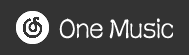
<style>
.page{position:relative;width:189px;height:55px;background:#333333}
.page>*{position:absolute;margin:0}
.t1{font:33.5px "FZSTK--GBK1-0";color:#ffffff;scale:0.75 1}
</style>
<div class="page">
<p class="t1" style="left:59px;top:18px;width:114px;height:21px">One Music</p>
</div>
